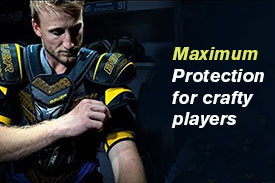
<style>
.page{position:relative;width:275px;height:183px}
.page>*{position:absolute;margin:0}
.t1{font:18px "AkzidenzGroteskBQ-BoldItalic";color:#ffffff}
.t2{font:18px "AkzidenzGroteskBQ-BoldItalic";color:#dee666}
</style>
<div class="page">
<p class="t1" style="left:171px;top:47px;width:93px;height:81px"><span class="t2">Maximum <br></span>Protection <br>for crafty<br>players</p>
</div>
